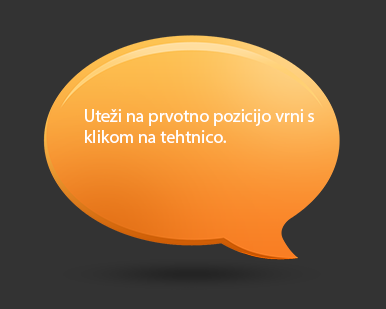
<style>
.page{position:relative;width:386px;height:309px;background:#333333}
.page>*{position:absolute;margin:0}
.t1{font:18px "MyriadPro-Regular";color:#ffffff}
</style>
<div class="page">
<p class="t1" style="left:85px;top:109px;width:229px;height:34px">Uteži na prvotno pozicijo vrni s klikom na tehtnico.</p>
</div>
